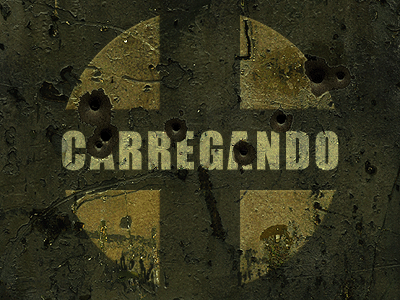
<style>
.page{position:relative;width:400px;height:300px}
.page>*{position:absolute;margin:0}
.t1{font:48.3px "Impact";letter-spacing:0.06em;text-transform:uppercase}
</style>
<div class="page">
<p class="t1" style="left:61px;top:130px;width:278px;height:41px">carregando</p>
</div>
